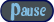
<style>
.page{position:relative;width:54px;height:22px;background:#444d52}
.page>*{position:absolute;margin:0}
.t1{font:33px "FantasticFont";color:#81bbe0}
</style>
<div class="page">
<p class="t1" style="left:10px;top:3px;width:36px;height:18px">Pause</p>
</div>
